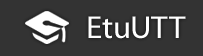
<style>
.page{position:relative;width:203px;height:56px;background:#333333}
.page>*{position:absolute;margin:0}
.t1{font:32px "MyriadWebPro";color:#ffffff}
</style>
<div class="page">
<p class="t1" style="left:88px;top:16px;width:98px;height:23px">EtuUTT</p>
</div>
